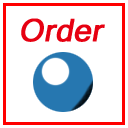
<style>
.page{position:relative;width:128px;height:128px;background:#ffffff}
.page>*{position:absolute;margin:0}
.t1{font:30px "Mangal";color:#e60011;font-weight:bold;font-style:italic}
</style>
<div class="page">
<p class="t1" style="left:21px;top:18px;width:84px;height:24px">Order</p>
</div>
